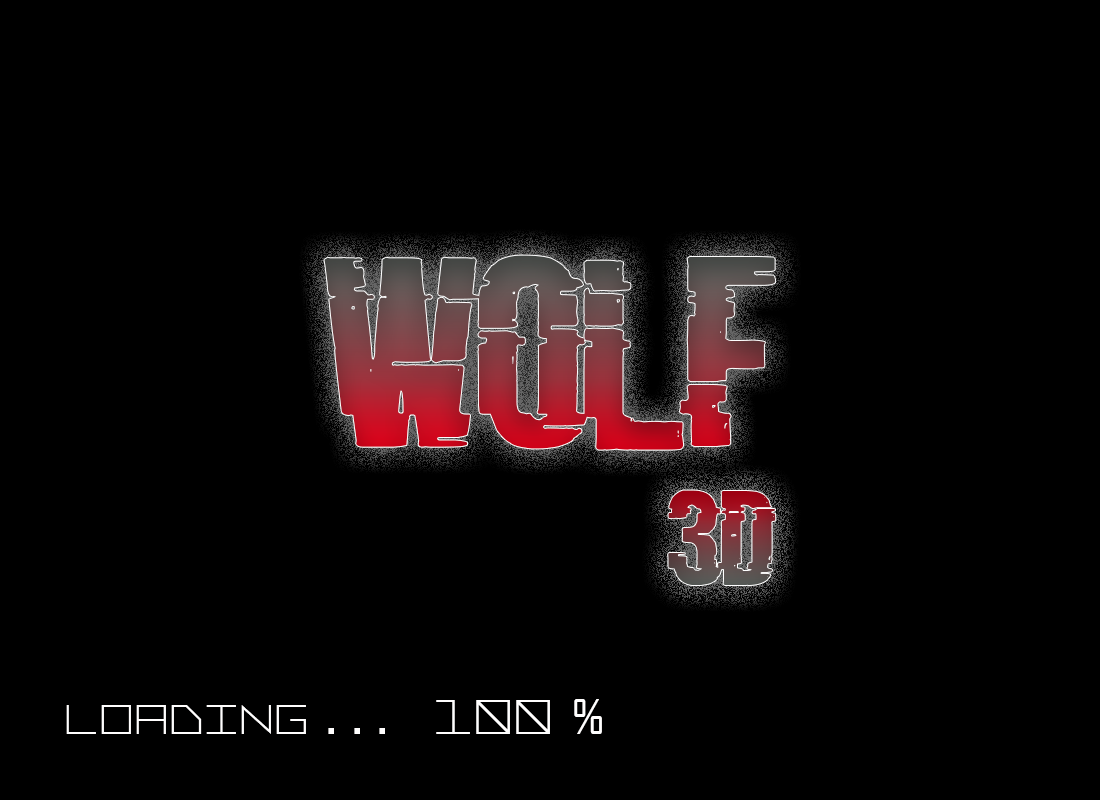
<style>
.page{position:relative;width:1100px;height:800px;background:#000000}
.page>*{position:absolute;margin:0}
.t1{font:250px "BadSignal"}
.t2{font:125px "BadSignal"}
.t3{font:58.3px "ReSquare-Regular";color:#fffefe}
.t4{font:50px "ReSquare-Bold";color:#fffefe}
.t5{font:66.7px "ReSquare-Regular";color:#fffefe}
.t6{font:45.8px "AgencyFB-Reg";color:#fffefe}
</style>
<div class="page">
<p class="t1" style="left:324px;top:255px;width:452px;height:195px">WOLF</p>
<p class="t2" style="left:668px;top:490px;width:108px;height:95px">3D</p>
<p class="t3" style="left:66px;top:699px;width:536px;height:35px">Loading <span class="t4">. . .   </span><span class="t5">100 </span><span class="t6">%</span></p>
</div>
